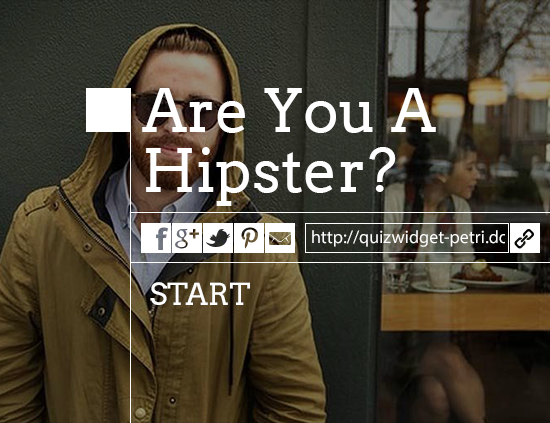
<style>
.page{position:relative;width:550px;height:423px}
.page>*{position:absolute;margin:0}
.t1{font:60px/60px "Arvo";color:#ffffff}
.t2{font:30px "Arvo";color:#fefefe;text-transform:uppercase}
</style>
<div class="page">
<p class="t1" style="left:142px;top:88px;width:294px;height:118px">Are You A Hipster?</p>
<p class="t2" style="left:150px;top:282px;width:100px;height:23px">start</p>
</div>
